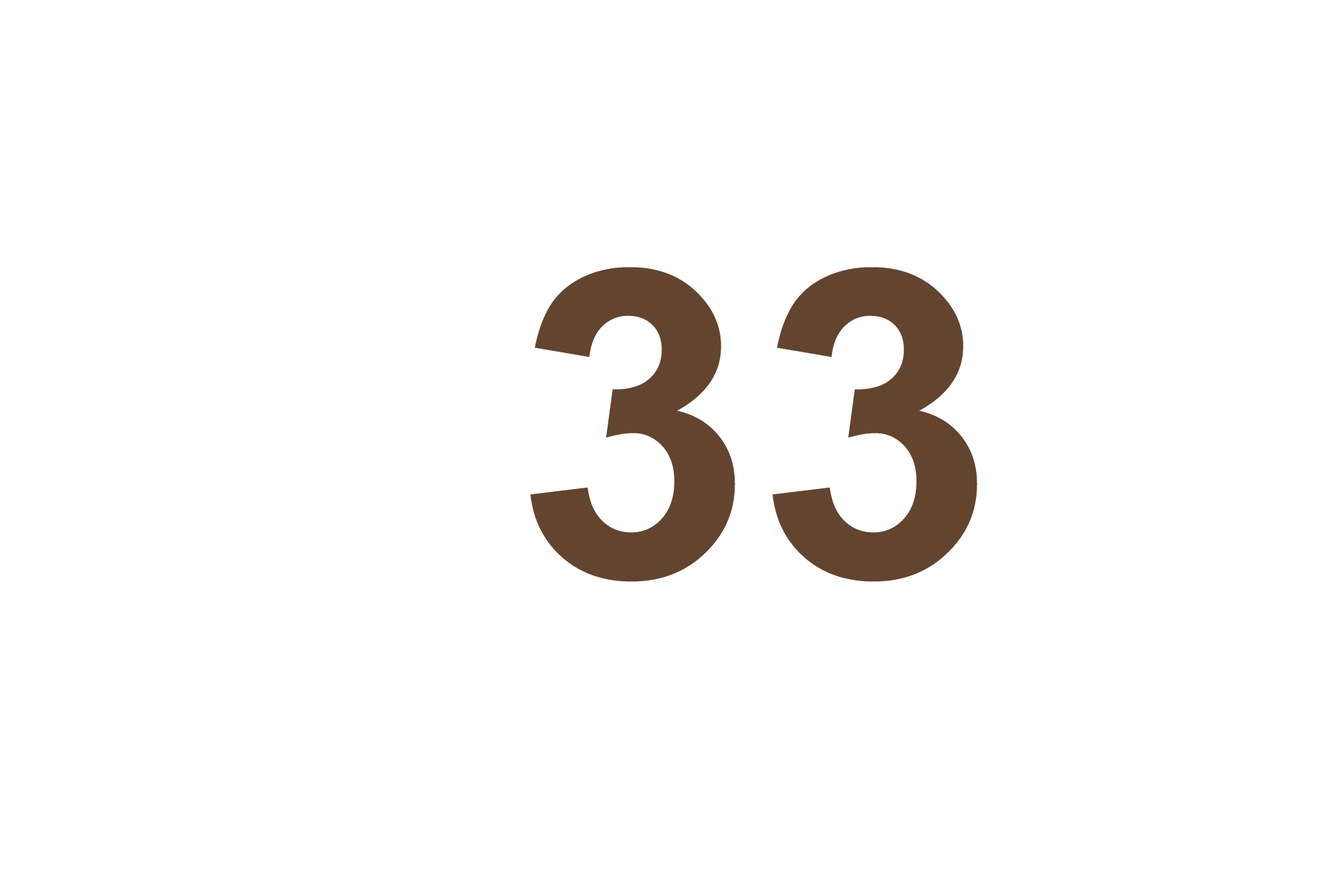
<style>
.page{position:relative;width:1337px;height:892px;background:#ffffff}
.page>*{position:absolute;margin:0}
.t1{font:429.6px "Arial-BoldMT";color:#63442f}
</style>
<div class="page">
<p class="t1" style="left:531px;top:267px;width:447px;height:315px">33</p>
</div>
